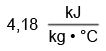
<style>
.page{position:relative;width:106px;height:51px;background:#ffffff}
.page>*{position:absolute;margin:0}
.t1{font:16px "ArialMT";color:#000000}
</style>
<div class="page">
<p class="t1" style="left:66px;top:6px;width:15px;height:12px">kJ</p>
<p class="t1" style="left:7px;top:18px;width:31px;height:15px">4,18</p>
<p class="t1" style="left:49px;top:30px;width:49px;height:15px">kg • °C</p>
</div>
